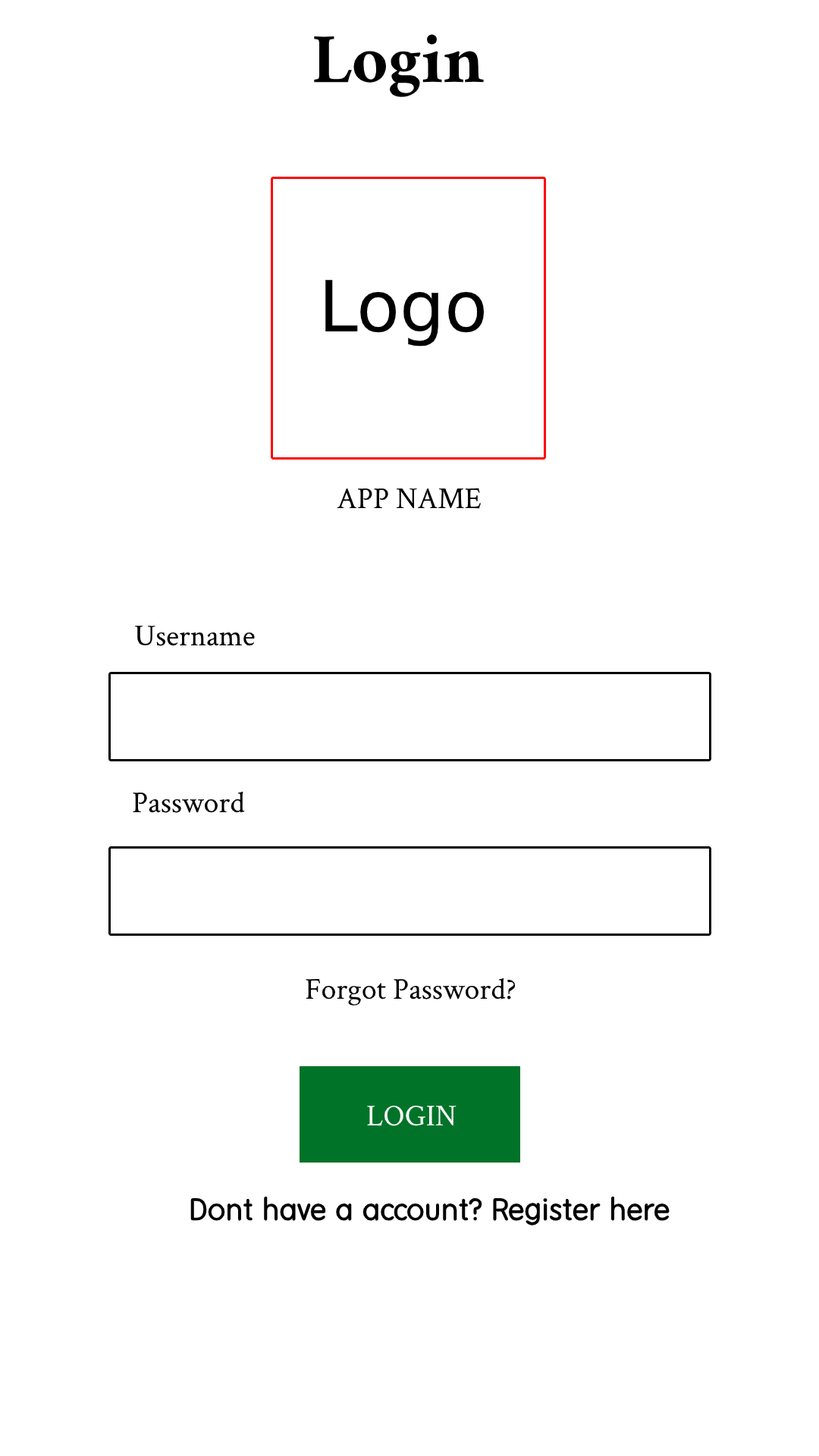
<style>
.page{position:relative;width:819px;height:1456px;background:#ffffff}
.page>*{position:absolute;margin:0}
.t1{font:70.5px "Crimson-Bold";color:#000000}
.t2{font:70.5px "DejaVuSans";color:#000000}
.t3{font:30.3px "CrimsonText-Regular";color:#000000}
.t4{font:30.3px "CrimsonText-Regular";color:#ffffff}
.t5{font:30.3px "DXLBaB-KSCpc-EUC-H";color:#000000}
</style>
<div class="page">
<p class="t1" style="left:313px;top:34px;width:171px;height:63px">Login</p>
<p class="t2" style="left:325px;top:280px;width:159px;height:67px">Logo</p>
<p class="t3" style="left:337px;top:488px;width:145px;height:21px">APP NAME</p>
<p class="t3" style="left:135px;top:626px;width:120px;height:20px">Username</p>
<p class="t3" style="left:133px;top:791px;width:112px;height:22px">Password</p>
<p class="t3" style="left:306px;top:977px;width:210px;height:29px">Forgot Password?</p>
<p class="t4" style="left:367px;top:1105px;width:90px;height:21px">LOGIN</p>
<p class="t5" style="left:190px;top:1196px;width:480px;height:29px">Dont have a account? Register here</p>
</div>
